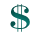
<style>
.page{position:relative;width:40px;height:34px;background:#ffffff}
.page>*{position:absolute;margin:0}
.t1{font:33px "EngraversMT";color:#08635b}
</style>
<div class="page">
<p class="t1" style="left:10px;top:4px;width:20px;height:28px">$</p>
</div>
